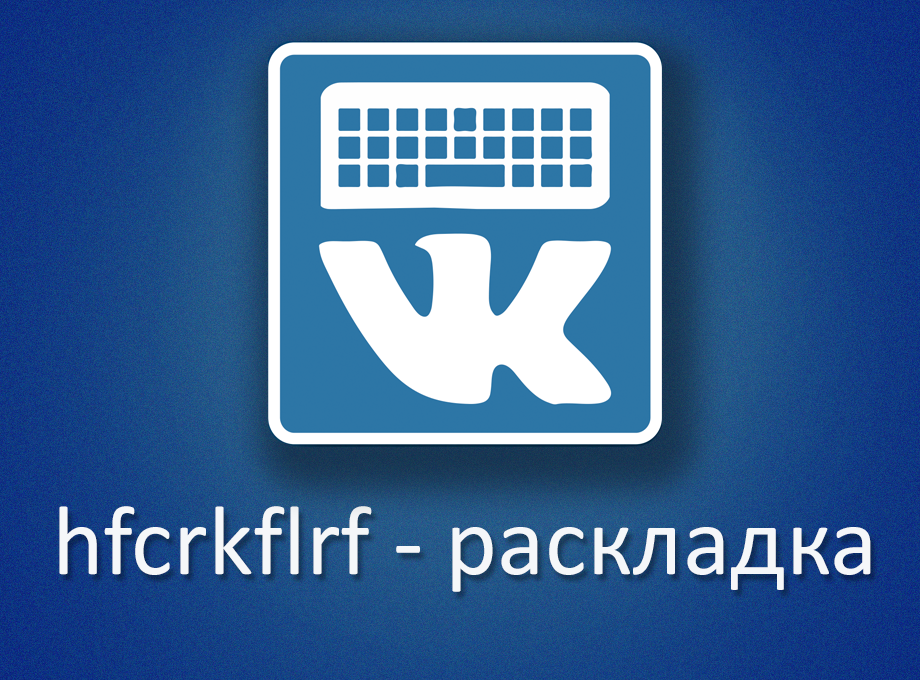
<style>
.page{position:relative;width:920px;height:680px}
.page>*{position:absolute;margin:0}
.t1{font:99.3px "Calibri";color:#f5f7f9}
</style>
<div class="page">
<p class="t1" style="left:59px;top:506px;width:812px;height:86px">hfcrkflrf - раскладка</p>
</div>
